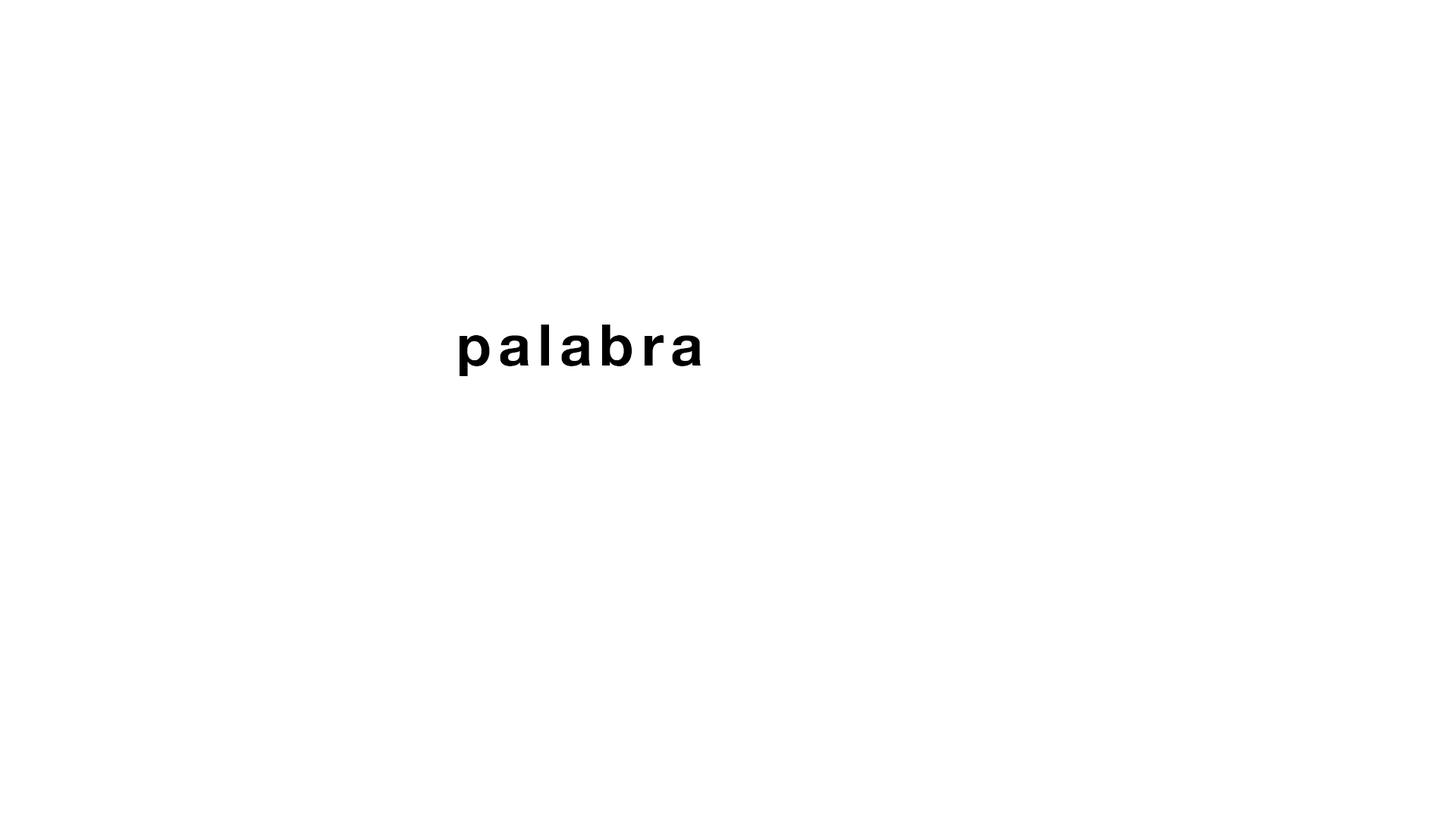
<style>
.page{position:relative;width:1456px;height:819px;background:#ffffff}
.page>*{position:absolute;margin:0}
.t1{font:56.9px "HelveticaNeue-Bold";letter-spacing:0.124em;color:#000000}
</style>
<div class="page">
<p class="t1" style="left:460px;top:325px;width:241px;height:51px">palabra</p>
</div>
